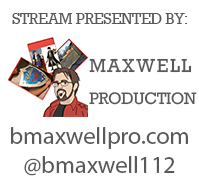
<style>
.page{position:relative;width:199px;height:181px;background:#ffffff}
.page>*{position:absolute;margin:0}
.t1{font:16px "Rockwell";letter-spacing:-0.025em;color:#595959}
.t2{font:17.1px/32px "Rockwell";letter-spacing:-0.025em;color:#595959}
.t3{font:19.2px/32px "Rockwell";letter-spacing:0.075em;color:#595959}
.t4{font:24px "MyriadPro-Regular";color:#595959}
</style>
<div class="page">
<p class="t1" style="left:12px;top:13px;width:176px;height:11px">STREAM PRESENTED BY:</p>
<p class="t2" style="left:89px;top:58px;width:108px;height:47px"><span class="t3">MAXWELL <br></span>PRODUCTION</p>
<p class="t4" style="left:11px;top:127px;width:177px;height:49px;text-align:center">bmaxwellpro.com<br>@bmaxwell112</p>
</div>
